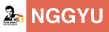
<style>
.page{position:relative;width:109px;height:32px;background:#e46751}
.page>*{position:absolute;margin:0}
.t1{font:20px "Helvetica-Bold";color:#ffffff}
</style>
<div class="page">
<p class="t1" style="left:32px;top:8px;width:71px;height:16px">NGGYU</p>
</div>
